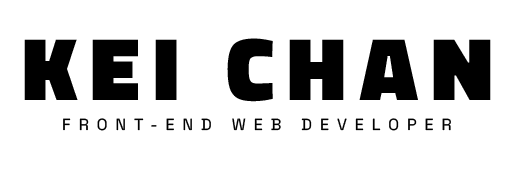
<style>
.page{position:relative;width:515px;height:170px;background:#ffffff}
.page>*{position:absolute;margin:0}
.t1{font:90px "TitilliumWeb-Black";letter-spacing:0.15em;color:#000000}
.t2{font:16px "SpaceGrotesk-Regular";letter-spacing:0.5em;color:#000000}
</style>
<div class="page">
<p class="t1" style="left:24px;top:38px;width:467px;height:64px">KEI CHAN</p>
<p class="t2" style="left:63px;top:118px;width:388px;height:13px">FRONT-END WEB DEVELOPER</p>
</div>
